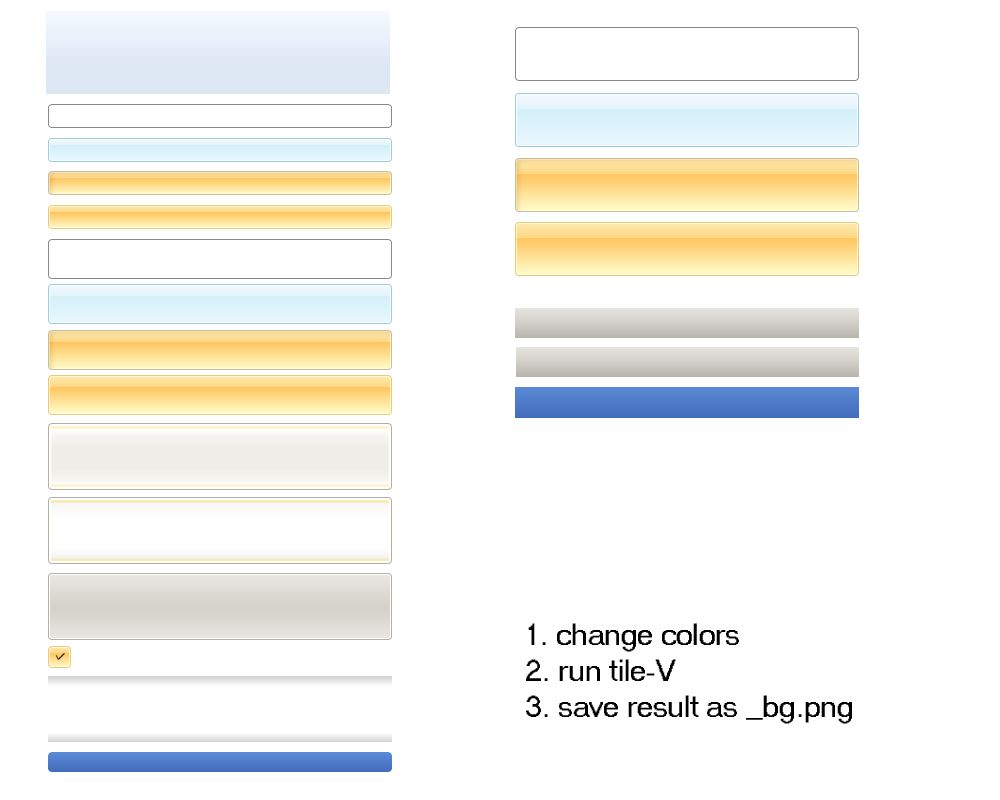
<style>
.page{position:relative;width:1000px;height:800px;background:#ffffff}
.page>*{position:absolute;margin:0}
.t1{font:30px "MS Sans Serif";letter-spacing:-0.01em;color:#000000}
</style>
<div class="page">
<p class="t1" style="left:526px;top:623px;width:326px;height:101px">1. change colors<br>2. run tile-V<br>3. save result as _bg.png</p>
</div>
